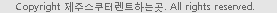
<style>
.page{position:relative;width:277px;height:13px;background:#e5e5e5}
.page>*{position:absolute;margin:0}
.t1{font:10px "MalgunGothicRegular";color:#666666}
</style>
<div class="page">
<p class="t1" style="left:16px;top:2px;width:238px;height:10px">Copyright 제주스쿠터렌트하는곳. All rights reserved.</p>
</div>
